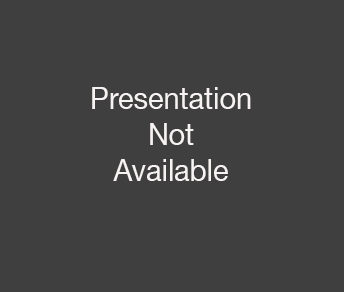
<style>
.page{position:relative;width:344px;height:292px;background:#403f3f}
.page>*{position:absolute;margin:0}
.t1{font:30px/36px "HelveticaNeueLT-Roman";color:#f7f3f3;scale:0.96 1}
</style>
<div class="page">
<p class="t1" style="left:92px;top:87px;width:159px;height:94px;text-align:center">Presentation<br>Not<br>Available</p>
</div>
